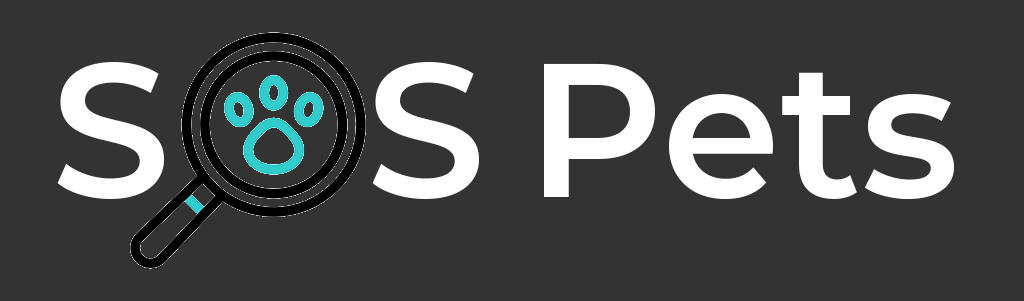
<style>
.page{position:relative;width:1024px;height:301px;background:#333333}
.page>*{position:absolute;margin:0}
.t1{font:190.3px "Montserrat-SemiBold";color:#ffffff}
</style>
<div class="page">
<p class="t1" style="left:57px;top:62px;width:107px;height:137px">S</p>
<p class="t1" style="left:372px;top:62px;width:107px;height:137px">S</p>
<p class="t1" style="left:544px;top:63px;width:410px;height:137px">Pets</p>
</div>
